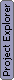
<style>
.page{position:relative;width:14px;height:80px;background:#9999bb}
.page>*{position:absolute;margin:0}
.t1{font:10px "Tahoma";color:#000000}
</style>
<div class="page">
<p class="t1" style="left:2px;top:4px;width:10px;height:72px;rotate:-90deg">Project Explorer</p>
</div>
